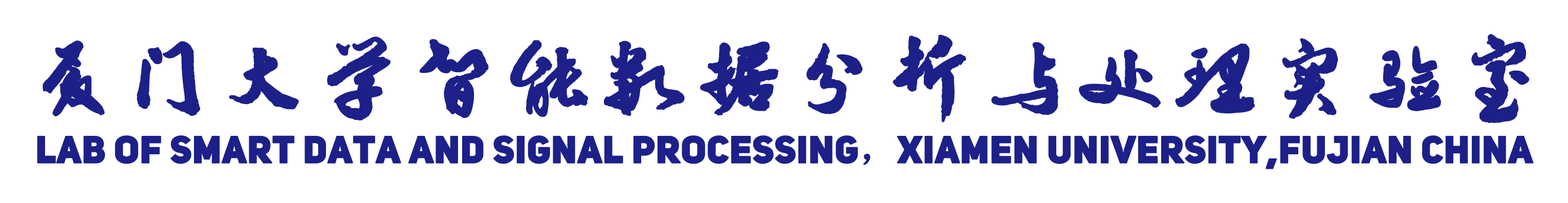
<style>
.page{position:relative;width:1568px;height:203px;background:#ffffff}
.page>*{position:absolute;margin:0}
.t1{font:92.6px "FZZJ-XTCSJW";color:#1d2088;font-weight:bold}
.t2{font:37.4px "UniSansHeavyCAPS";color:#1d2088;font-weight:bold}
.t3{font:37.4px "SimSun";color:#1d2088;font-weight:bold}
</style>
<div class="page">
<p class="t1" style="left:42px;top:34px;width:1488px;height:89px">厦门大学智能数据分析与处理实验室</p>
<p class="t2" style="left:37px;top:135px;width:1497px;height:34px">Lab of Smart Data and Signal Processing<span class="t3">，</span>xiamen university,fujian china</p>
</div>
